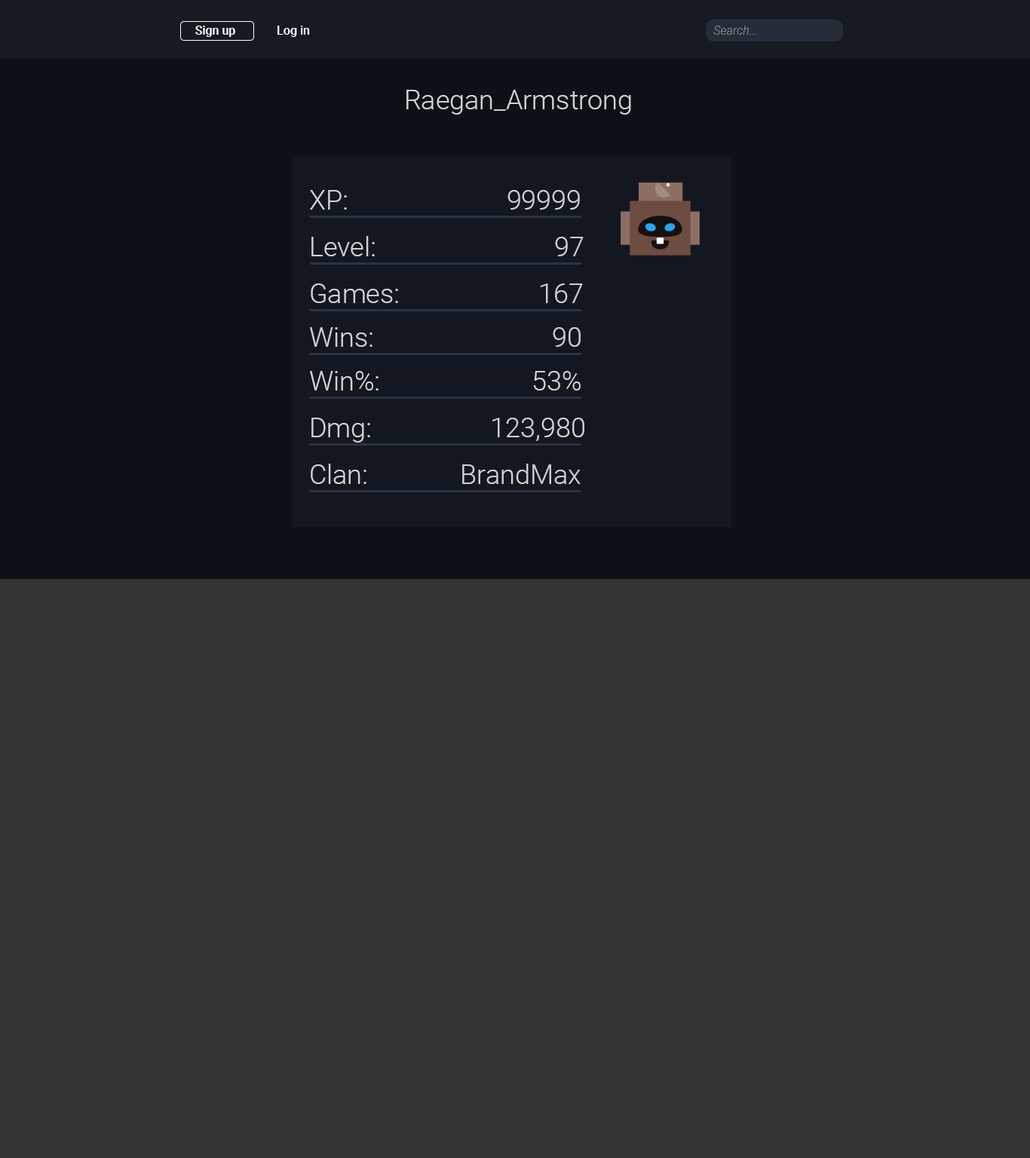
<style>
.page{position:relative;width:1030px;height:1158px;background:#333333}
.page>*{position:absolute;margin:0}
.t1{font:12.1px "Roboto-Medium";color:#ffffff}
.t2{font:12.1px "Roboto-LightItalic";color:#808283}
.t3{font:27.1px "Roboto-Light";color:#d0d1d2}
</style>
<div class="page">
<p class="t1" style="left:195px;top:26px;width:40px;height:11px">Sign up</p>
<p class="t1" style="left:277px;top:26px;width:33px;height:11px">Log in</p>
<p class="t2" style="left:713px;top:26px;width:44px;height:9px">Search...</p>
<p class="t3" style="left:406px;top:90px;width:225px;height:25px">Raegan_Armstrong</p>
<p class="t3" style="left:310px;top:190px;width:270px;height:20px">XP:                        99999</p>
<p class="t3" style="left:311px;top:236px;width:272px;height:20px">Level:                           97</p>
<p class="t3" style="left:311px;top:283px;width:272px;height:20px">Games:                     167</p>
<p class="t3" style="left:310px;top:327px;width:270px;height:20px">Wins:                           90</p>
<p class="t3" style="left:310px;top:371px;width:270px;height:20px">Win%:                       53%</p>
<p class="t3" style="left:311px;top:418px;width:273px;height:25px">Dmg:                  123,980</p>
<p class="t3" style="left:311px;top:464px;width:269px;height:20px">Clan:              BrandMax</p>
</div>
